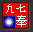
<style>
.page{position:relative;width:33px;height:32px;background:#f20000}
.page>*{position:absolute;margin:0}
.t1{font:10.4px "SimSun";color:#ffffff}
.t2{font:11.7px "SimSun";color:#ffffff}
</style>
<div class="page">
<p class="t1" style="left:6px;top:4px;width:20px;height:9px">九七</p>
<p class="t2" style="left:16px;top:15px;width:11px;height:12px">奉</p>
</div>
